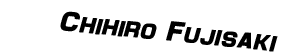
<style>
.page{position:relative;width:283px;height:56px;background:#ffffff}
.page>*{position:absolute;margin:0}
.t1{font:28px "Maximus";color:#000000;font-weight:bold;font-style:italic}
</style>
<div class="page">
<p class="t1" style="left:60px;top:11px;width:218px;height:41px;rotate:6deg">Chihiro Fujisaki</p>
</div>
